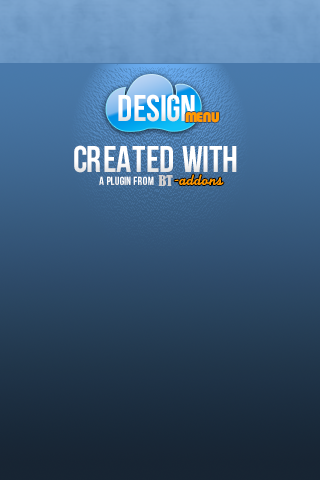
<style>
.page{position:relative;width:320px;height:480px}
.page>*{position:absolute;margin:0}
.t1{font:37.2px "BebasNeue";letter-spacing:0.01em;color:#ffffff}
.t2{font:14.8px "Bauhaus93";letter-spacing:-0.09em;color:#ff9900;scale:1.06 1}
.t3{font:15.1px "JCfg";color:#ff9900}
.t4{font:11.6px "BebasNeue";letter-spacing:0.01em;color:#ffffff}
.t5{font:13.7px "BernardMT-Condensed";color:#d2cfce}
</style>
<div class="page">
<p class="t1" style="left:118px;top:94px;width:77px;height:28px">DESIGN</p>
<p class="t2" style="left:185px;top:112px;width:34px;height:11px">MENU</p>
<p class="t1" style="left:74px;top:145px;width:163px;height:28px">CREATED WITH</p>
<p class="t3" style="left:174px;top:174px;width:50px;height:11px">-addons</p>
<p class="t4" style="left:99px;top:176px;width:55px;height:9px">A PLUGIN FROM</p>
<p class="t5" style="left:158px;top:175px;width:15px;height:11px">BT</p>
</div>
